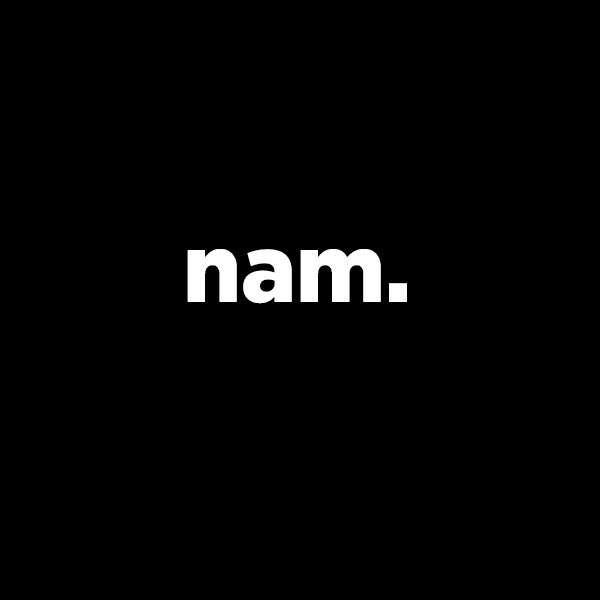
<style>
.page{position:relative;width:600px;height:600px;background:#000000}
.page>*{position:absolute;margin:0}
.t1{font:96px "GothamPro-Black";color:#ffffff;scale:0.96 1}
</style>
<div class="page">
<p class="t1" style="left:187px;top:249px;width:220px;height:55px">nam.</p>
</div>
